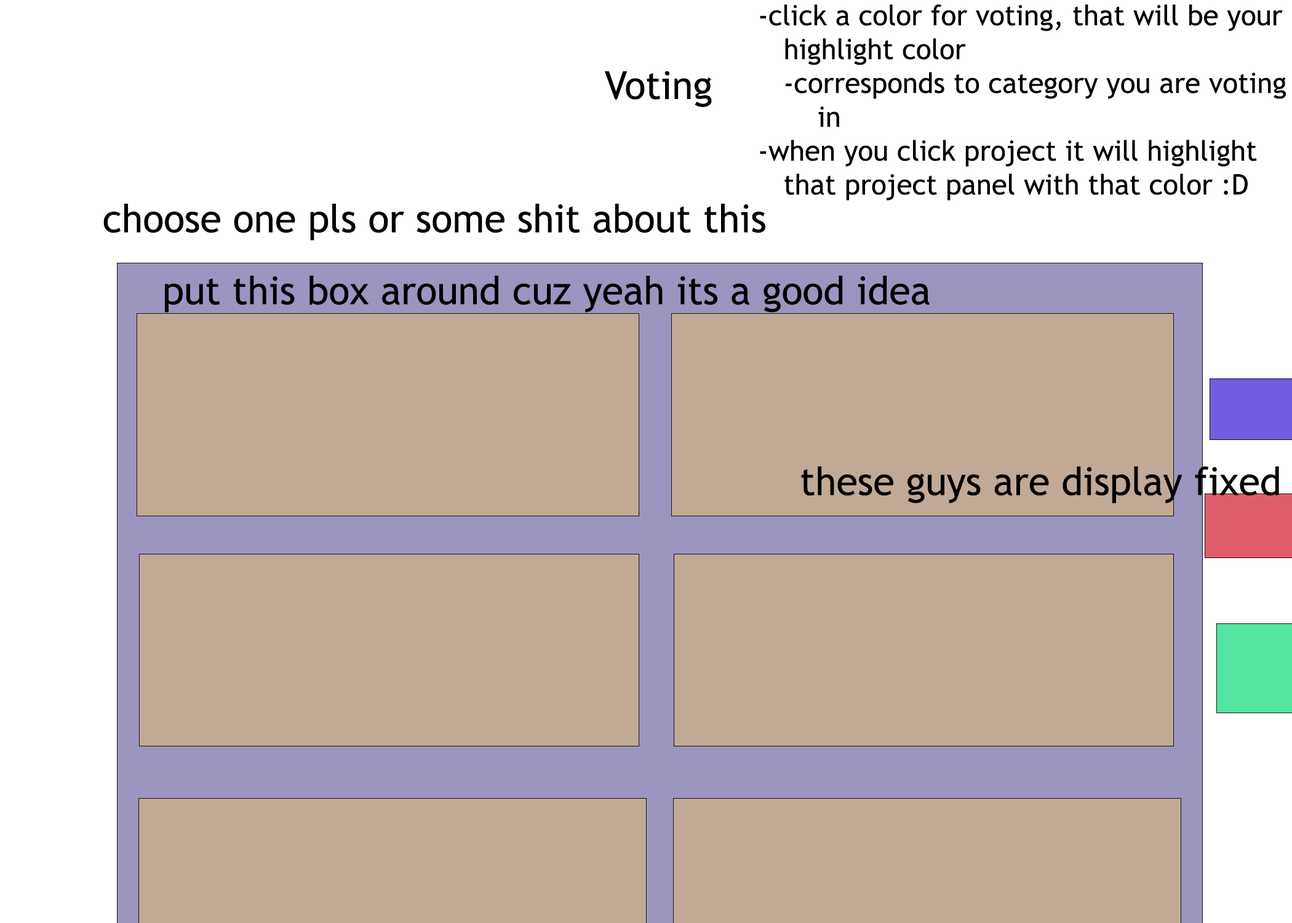
<style>
.page{position:relative;width:1292px;height:923px;background:#c0aa95}
.page>*{position:absolute;margin:0}
.t1{font:28.2px "TrebuchetMS";color:#000000}
.t2{font:38.8px "TrebuchetMS";color:#000000}
</style>
<div class="page">
<p class="t1" style="left:760px;top:4px;width:526px;height:197px">-click a color for voting, that will be your<br>   highlight color<br>   -corresponds to category you are voting<br>       in<br>-when you click project it will highlight<br>   that project panel with that color :D</p>
<p class="t2" style="left:604px;top:71px;width:108px;height:36px">Voting</p>
<p class="t2" style="left:103px;top:204px;width:662px;height:37px">choose one pls or some shit about this</p>
<p class="t2" style="left:165px;top:276px;width:765px;height:37px">put this box around cuz yeah its a good idea</p>
<p class="t2" style="left:801px;top:466px;width:478px;height:37px">these guys are display fixed</p>
</div>
